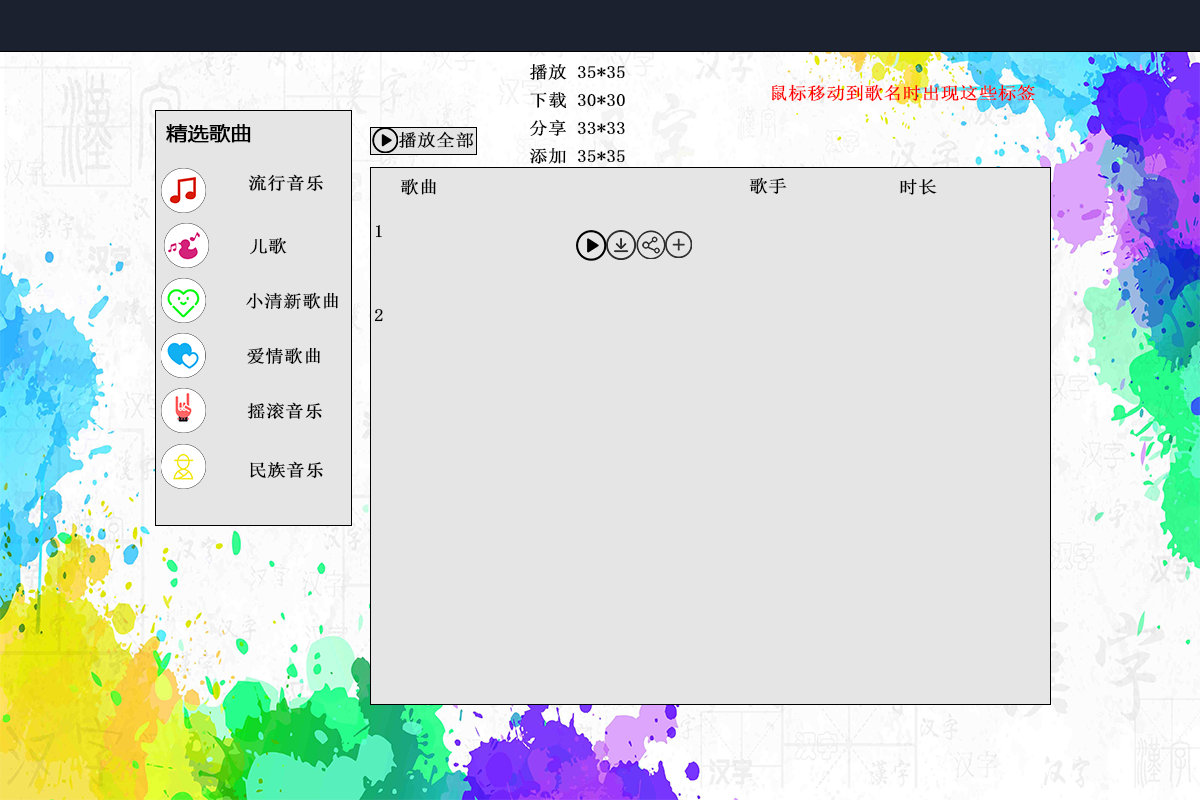
<style>
.page{position:relative;width:1200px;height:800px;background:#e5e5e5}
.page>*{position:absolute;margin:0}
.t1{font:17.3px "SimSun";color:#000000;font-weight:bold;scale:1.07 1}
.t2{font:17.3px "SimSun";color:#ff0000;font-weight:bold;scale:1.07 1}
.t3{font:19.4px "MicrosoftYaHei";color:#000000;font-weight:bold;scale:1.07 1}
</style>
<div class="page">
<p class="t1" style="left:529px;top:64px;width:96px;height:100px">播放 35*35<br>下载 30*30<br>分享 33*33<br>添加 35*35</p>
<p class="t2" style="left:772px;top:84px;width:263px;height:18px">鼠标移动到歌名时出现这些标签</p>
<p class="t3" style="left:166px;top:124px;width:85px;height:19px">精选歌曲</p>
<p class="t1" style="left:398px;top:131px;width:76px;height:17px">播放全部</p>
<p class="t1" style="left:249px;top:174px;width:74px;height:18px">流行音乐</p>
<p class="t1" style="left:400px;top:178px;width:36px;height:17px">歌曲</p>
<p class="t1" style="left:749px;top:177px;width:38px;height:17px">歌手</p>
<p class="t1" style="left:900px;top:179px;width:37px;height:16px">时长</p>
<p class="t1" style="left:374px;top:225px;width:9px;height:97px">1<br><br><br>2</p>
<p class="t1" style="left:250px;top:237px;width:37px;height:18px">儿歌</p>
<p class="t1" style="left:246px;top:292px;width:92px;height:18px">小清新歌曲</p>
<p class="t1" style="left:247px;top:347px;width:73px;height:17px">爱情歌曲</p>
<p class="t1" style="left:247px;top:402px;width:75px;height:18px">摇滚音乐</p>
<p class="t1" style="left:250px;top:461px;width:73px;height:18px">民族音乐</p>
</div>
